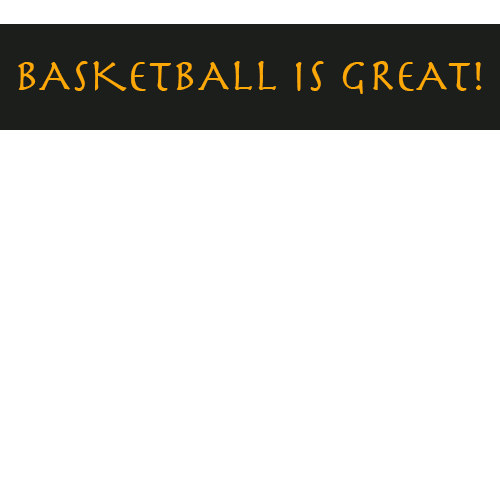
<style>
.page{position:relative;width:500px;height:500px;background:#ffffff}
.page>*{position:absolute;margin:0}
.t1{font:47px "Herculanum";color:#fca806}
</style>
<div class="page">
<p class="t1" style="left:18px;top:61px;width:464px;height:33px">BASKETBALL IS GREAT!</p>
</div>
